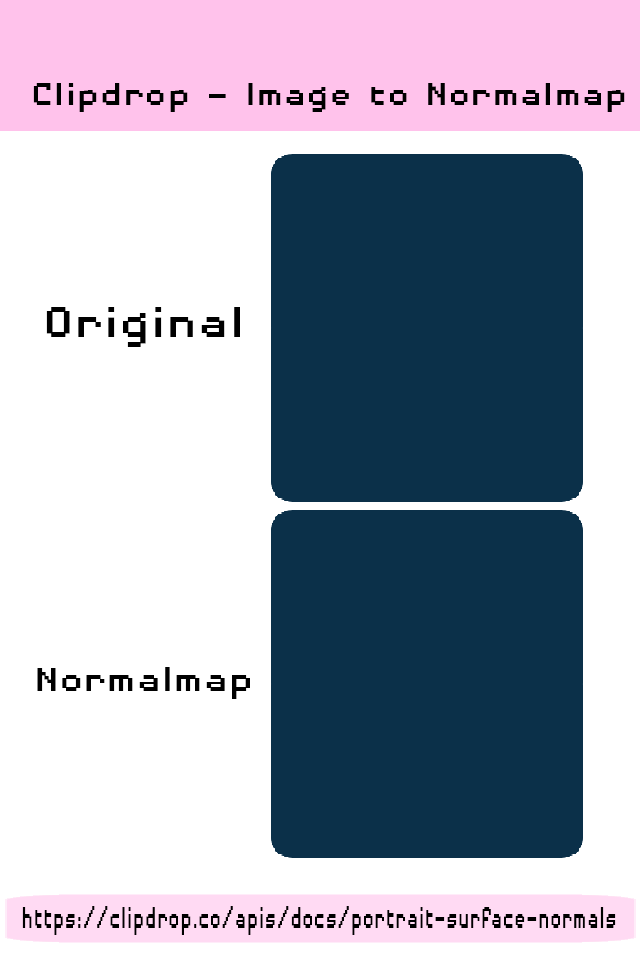
<style>
.page{position:relative;width:640px;height:960px;background:#ffffff}
.page>*{position:absolute;margin:0}
.t1{font:40.9px "DisposableDroidBB";color:#000000;scale:1.14 1}
.t2{font:55.8px "DisposableDroidBB";color:#000000;scale:1.14 1}
.t3{font:44.3px "DisposableDroidBB";color:#000000;scale:1.14 1}
.t4{font:39.7px "DisposableDroidBB";color:#000000;scale:0.62 1}
</style>
<div class="page">
<p class="t1" style="left:33px;top:83px;width:592px;height:29px">Clipdrop - Image to Normalmap</p>
<p class="t2" style="left:46px;top:307px;width:194px;height:40px">Original</p>
<p class="t3" style="left:37px;top:667px;width:213px;height:32px">Normalmap</p>
<p class="t4" style="left:22px;top:906px;width:594px;height:29px">https://clipdrop.co/apis/docs/portrait-surface-normals</p>
</div>
